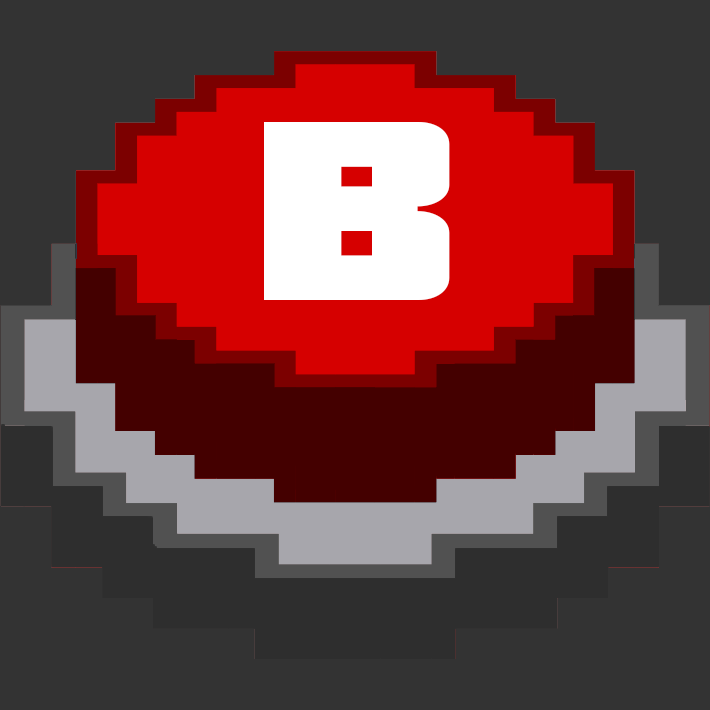
<style>
.page{position:relative;width:710px;height:710px;background:#333333}
.page>*{position:absolute;margin:0}
.t1{font:254.4px "Molot";color:#ffffff;scale:1.39 1}
</style>
<div class="page">
<p class="t1" style="left:264px;top:122px;width:186px;height:178px">B</p>
</div>
